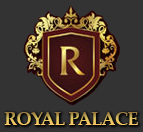
<style>
.page{position:relative;width:143px;height:132px;background:#333333}
.page>*{position:absolute;margin:0}
.t1{font:18px "PalatinoLinotype-Bold";letter-spacing:-0.03em}
</style>
<div class="page">
<p class="t1" style="left:4px;top:112px;width:134px;height:13px">ROYAL PALACE</p>
</div>
